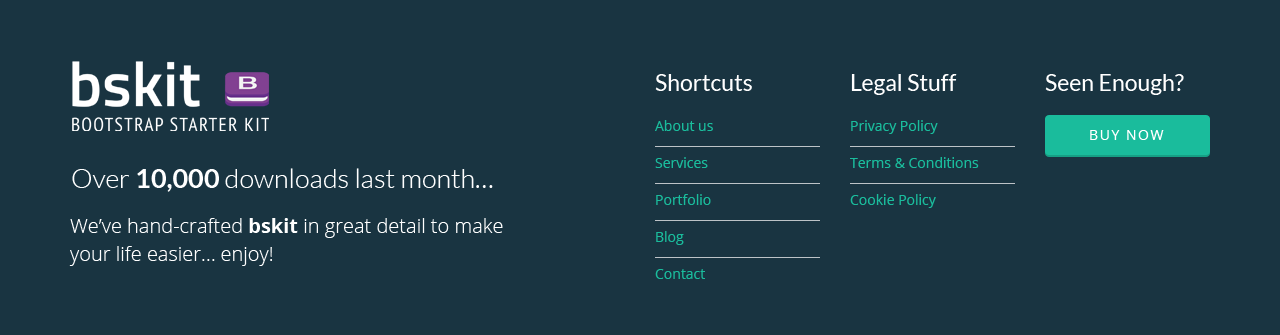
<style>
.page{position:relative;width:1280px;height:335px;background:#193441}
.page>*{position:absolute;margin:0}
.t1{font:23px "Lato-Regular";color:#ffffff}
.t2{font:14px/37px "OpenSans";color:#1abc9c}
.t3{font:14px "OpenSans";letter-spacing:0.11em;color:#ffffff}
.t4{font:27px "Lato-Light";color:#ffffff}
.t5{font:27px "Lato-Bold";color:#ffffff}
.t6{font:20px/28px "OpenSans-Light";color:#ffffff}
.t7{font:20px/28px "OpenSans-Bold";color:#ffffff}
</style>
<div class="page">
<p class="t1" style="left:655px;top:74px;width:97px;height:17px">Shortcuts</p>
<p class="t1" style="left:851px;top:74px;width:106px;height:21px">Legal Stuff</p>
<p class="t1" style="left:1045px;top:74px;width:139px;height:21px">Seen Enough?</p>
<p class="t2" style="left:655px;top:120px;width:58px;height:159px">About us<br>Services<br>Portfolio<br>Blog<br>Contact</p>
<p class="t2" style="left:850px;top:120px;width:129px;height:88px">Privacy Policy<br>Terms &amp; Conditions<br>Cookie Policy</p>
<p class="t3" style="left:1090px;top:130px;width:74px;height:10px">BUY NOW</p>
<p class="t4" style="left:72px;top:168px;width:421px;height:24px">Over <span class="t5">10,000</span> downloads last month…</p>
<p class="t6" style="left:69px;top:218px;width:434px;height:48px">We’ve hand-crafted <span class="t7">bskit </span>in great detail to make<br>your life easier… enjoy!</p>
</div>
